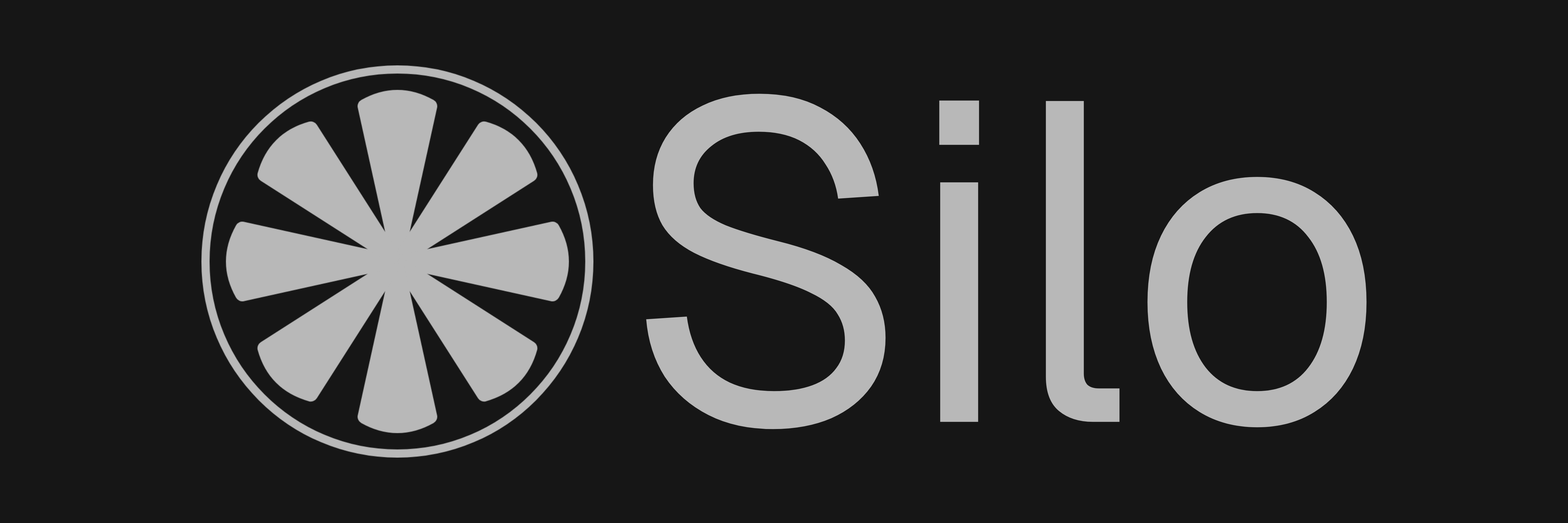
<style>
.page{position:relative;width:1568px;height:523px;background:#161616}
.page>*{position:absolute;margin:0}
.t1{font:451.6px "Geist-Regular";color:#b8b8b8}
</style>
<div class="page">
<p class="t1" style="left:646px;top:94px;width:721px;height:335px">Silo</p>
</div>
